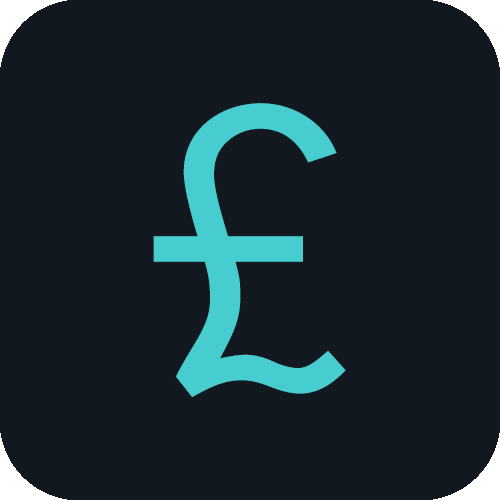
<style>
.page{position:relative;width:500px;height:500px;background:#12181f}
.page>*{position:absolute;margin:0}
.t1{font:400px "LetterGothicStd-Bold";color:#47cdcf}
</style>
<div class="page">
<p class="t1" style="left:153px;top:103px;width:193px;height:294px">£</p>
</div>
